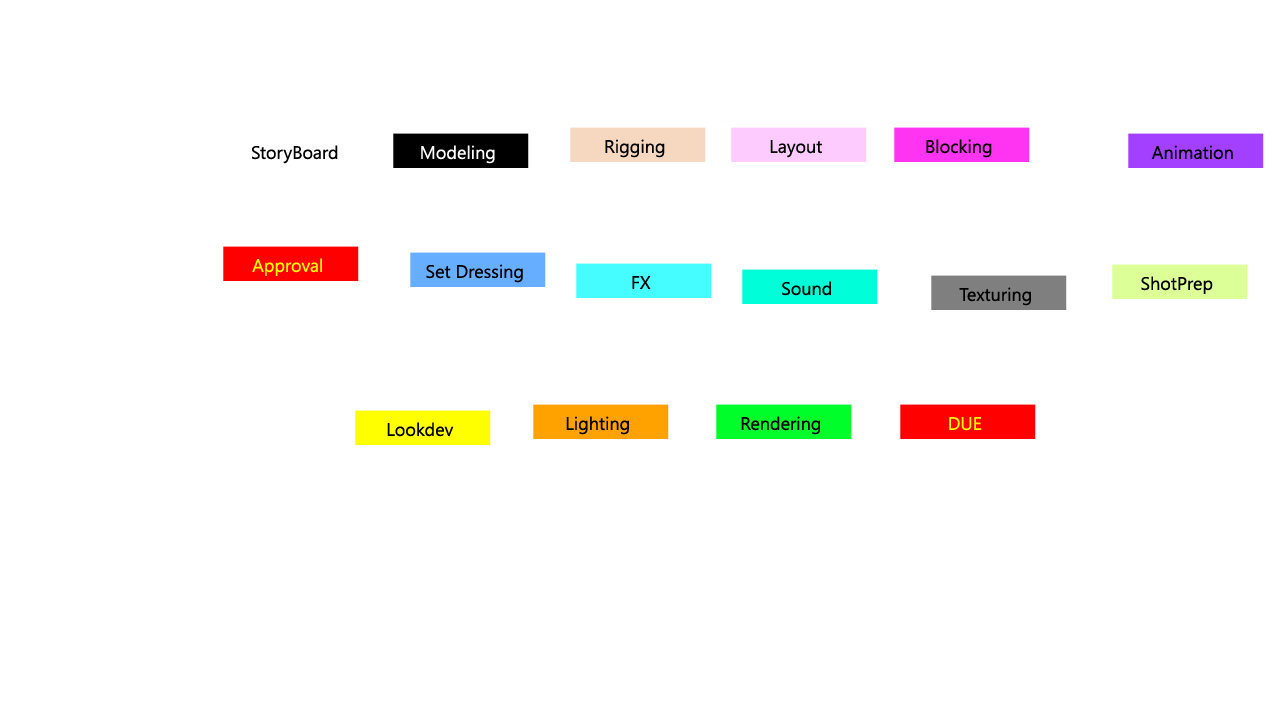
<style>
.page{position:relative;width:1280px;height:720px;background:#ffffff}
.page>*{position:absolute;margin:0}
.t1{font:18px "SegoeUI";color:#000000}
.t2{font:18px "SegoeUI";color:#ffffff}
.t3{font:18px "SegoeUI";color:#ffff00}
</style>
<div class="page">
<p class="t1" style="left:252px;top:145px;width:86px;height:19px">StoryBoard</p>
<p class="t2" style="left:421px;top:145px;width:74px;height:19px">Modeling</p>
<p class="t1" style="left:605px;top:139px;width:60px;height:19px">Rigging</p>
<p class="t1" style="left:770px;top:140px;width:52px;height:18px">Layout</p>
<p class="t1" style="left:926px;top:139px;width:66px;height:19px">Blocking</p>
<p class="t1" style="left:1151px;top:145px;width:82px;height:15px">Animation</p>
<p class="t3" style="left:252px;top:258px;width:70px;height:18px">Approval</p>
<p class="t1" style="left:426px;top:264px;width:97px;height:19px">Set Dressing</p>
<p class="t1" style="left:632px;top:276px;width:19px;height:13px">FX</p>
<p class="t1" style="left:782px;top:281px;width:49px;height:15px">Sound</p>
<p class="t1" style="left:1141px;top:276px;width:72px;height:18px">ShotPrep</p>
<p class="t1" style="left:959px;top:287px;width:72px;height:19px">Texturing</p>
<p class="t1" style="left:387px;top:422px;width:67px;height:15px">Lookdev</p>
<p class="t1" style="left:566px;top:416px;width:63px;height:19px">Lighting</p>
<p class="t1" style="left:741px;top:416px;width:79px;height:19px">Rendering</p>
<p class="t3" style="left:949px;top:417px;width:33px;height:14px">DUE</p>
</div>
